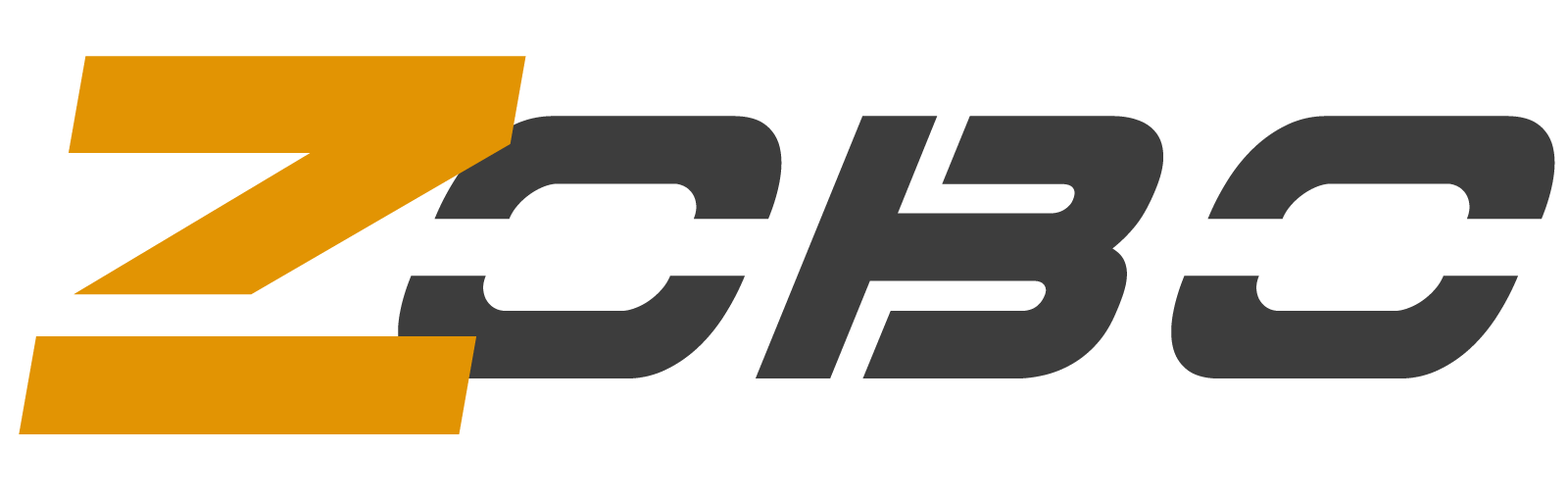
<style>
.page{position:relative;width:1568px;height:502px;background:#ffffff}
.page>*{position:absolute;margin:0}
.t1{font:596.1px "7thServiceTitle";color:#e29403;font-style:italic}
.t2{font:413.5px "7thServiceSuper-Italic";color:#3e3e3e;scale:0.92 1}
</style>
<div class="page">
<p class="t1" style="left:19px;top:56px;width:507px;height:378px">Z</p>
<p class="t2" style="left:398px;top:116px;width:1157px;height:262px">obo</p>
</div>
